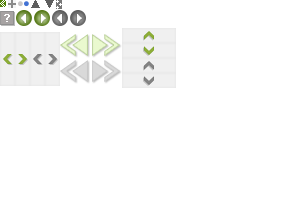
<style>
.page{position:relative;width:300px;height:200px;background:#ffffff}
.page>*{position:absolute;margin:0}
.t1{font:12px "Dotum";color:#5e5e5e}
</style>
<div class="page">
<p class="t1" style="left:31px;top:0px;width:23px;height:8px">▲ ▼</p>
</div>
